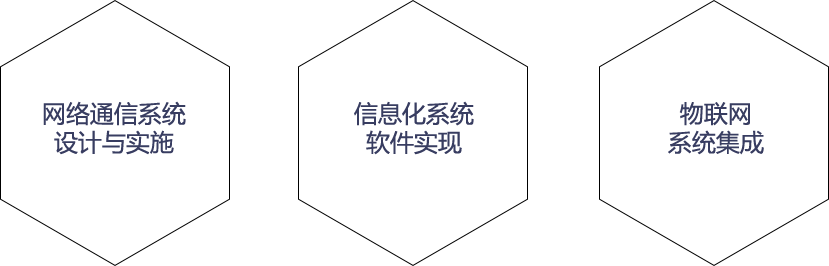
<style>
.page{position:relative;width:829px;height:266px;background:#ffffff}
.page>*{position:absolute;margin:0}
.t1{font:24px "MicrosoftYaHei";color:#383d61}
</style>
<div class="page">
<p class="t1" style="left:43px;top:101px;width:143px;height:54px;text-align:center">网络通信系统<br>设计与实施</p>
<p class="t1" style="left:354px;top:101px;width:120px;height:54px;text-align:center">信息化系统<br>软件实现</p>
<p class="t1" style="left:668px;top:102px;width:96px;height:53px;text-align:center">物联网<br>系统集成</p>
</div>
